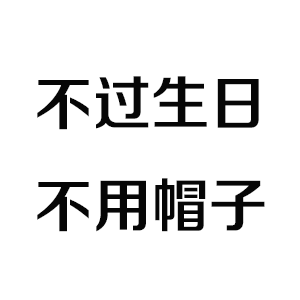
<style>
.page{position:relative;width:300px;height:300px;background:#ffffff}
.page>*{position:absolute;margin:0}
.t1{font:58.3px "FZZZHONGJW--GB1-0";color:#060606;text-transform:uppercase}
</style>
<div class="page">
<p class="t1" style="left:37px;top:76px;width:228px;height:156px;text-align:center">不过生日<br>不用帽子</p>
</div>
